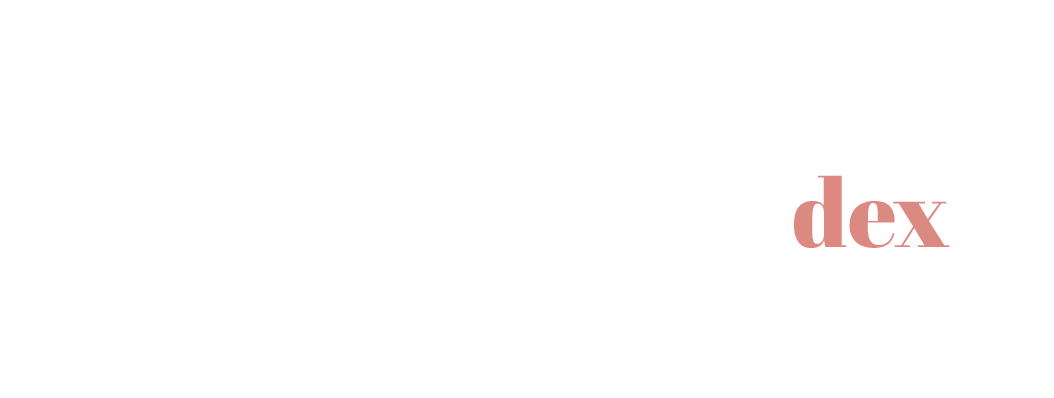
<style>
.page{position:relative;width:1054px;height:398px;background:#ffffff}
.page>*{position:absolute;margin:0}
.t1{font:94.9px "AbrilFatface-Regular";color:#db8981}
</style>
<div class="page">
<p class="t1" style="left:794px;top:175px;width:156px;height:73px">dex</p>
</div>
